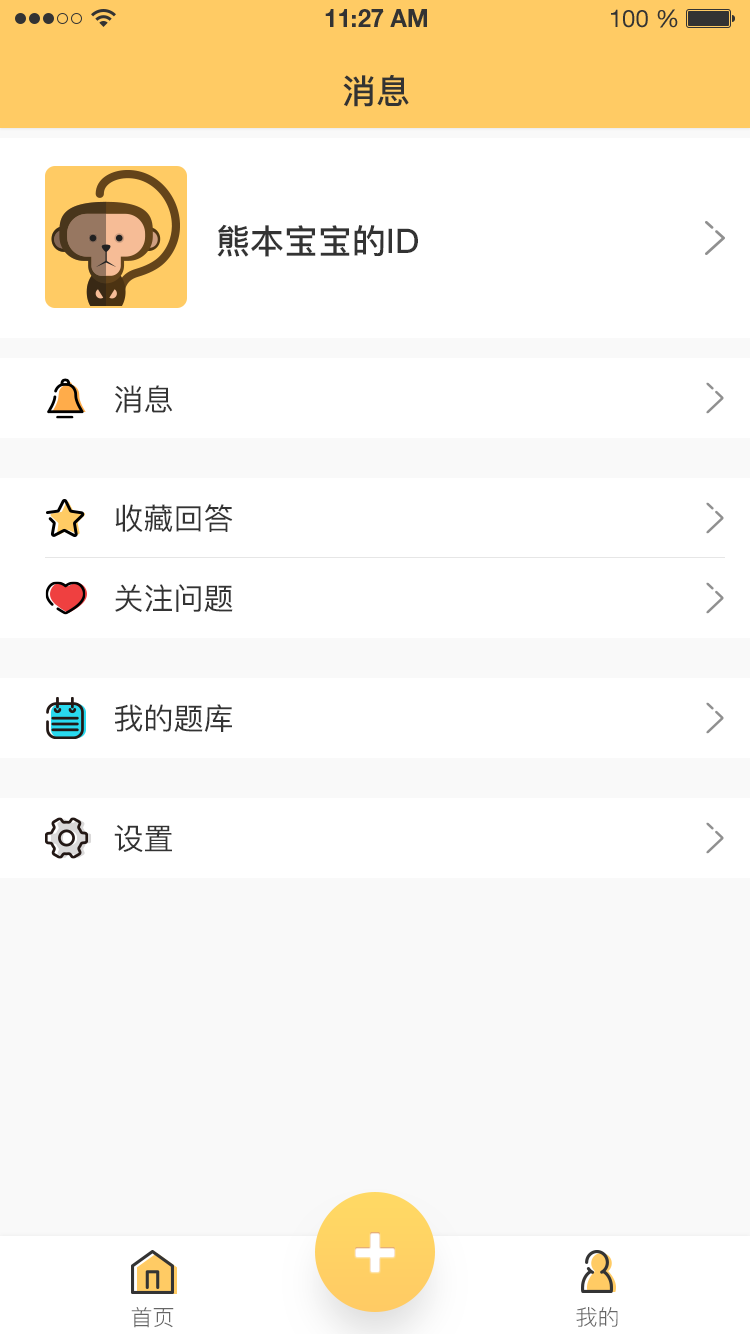
<style>
.page{position:relative;width:750px;height:1334px;background:#ffffff}
.page>*{position:absolute;margin:0}
.t1{font:34px "PingFang-SC-Bold";color:#333333;text-transform:uppercase}
.t2{font:30px "PingFang-SC-Medium";color:#333333;text-transform:uppercase}
.t3{font:22px "PingFang-SC-Regular";color:#666666;text-transform:uppercase}
</style>
<div class="page">
<p class="t1" style="left:343px;top:74px;width:66px;height:33px">消息</p>
<p class="t1" style="left:217px;top:224px;width:201px;height:33px">熊本宝宝的id</p>
<p class="t2" style="left:115px;top:385px;width:58px;height:28px">消息</p>
<p class="t2" style="left:115px;top:504px;width:118px;height:28px">收藏回答</p>
<p class="t2" style="left:115px;top:584px;width:118px;height:28px">关注问题</p>
<p class="t2" style="left:115px;top:704px;width:117px;height:28px">我的题库</p>
<p class="t2" style="left:114px;top:825px;width:58px;height:27px">设置</p>
<p class="t3" style="left:131px;top:1307px;width:43px;height:21px">首页</p>
<p class="t3" style="left:576px;top:1307px;width:42px;height:20px">我的</p>
</div>
